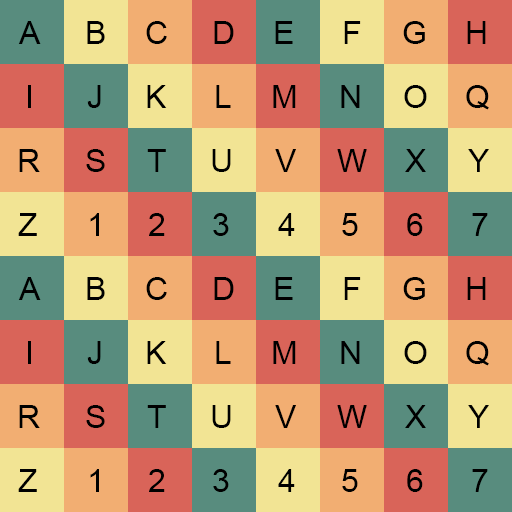
<style>
.page{position:relative;width:512px;height:512px;background:#f2e494}
.page>*{position:absolute;margin:0}
.t1{font:32px "ArialMT";color:#000000}
</style>
<div class="page">
<p class="t1" style="left:18px;top:21px;width:23px;height:23px">A</p>
<p class="t1" style="left:87px;top:21px;width:18px;height:23px">B</p>
<p class="t1" style="left:146px;top:21px;width:21px;height:23px">C</p>
<p class="t1" style="left:214px;top:21px;width:20px;height:23px">D</p>
<p class="t1" style="left:275px;top:21px;width:18px;height:23px">E</p>
<p class="t1" style="left:344px;top:21px;width:17px;height:23px">F</p>
<p class="t1" style="left:403px;top:21px;width:22px;height:23px">G</p>
<p class="t1" style="left:467px;top:21px;width:19px;height:23px">H</p>
<p class="t1" style="left:87px;top:85px;width:14px;height:23px">J</p>
<p class="t1" style="left:147px;top:85px;width:20px;height:23px">K</p>
<p class="t1" style="left:216px;top:85px;width:15px;height:23px">L</p>
<p class="t1" style="left:273px;top:85px;width:23px;height:23px">M</p>
<p class="t1" style="left:341px;top:85px;width:19px;height:23px">N</p>
<p class="t1" style="left:404px;top:85px;width:23px;height:23px">O</p>
<p class="t1" style="left:466px;top:85px;width:23px;height:25px">Q</p>
<p class="t1" style="left:19px;top:149px;width:21px;height:23px">R</p>
<p class="t1" style="left:86px;top:149px;width:19px;height:23px">S</p>
<p class="t1" style="left:147px;top:149px;width:19px;height:23px">T</p>
<p class="t1" style="left:212px;top:149px;width:19px;height:23px">U</p>
<p class="t1" style="left:275px;top:149px;width:21px;height:23px">V</p>
<p class="t1" style="left:337px;top:149px;width:30px;height:23px">W</p>
<p class="t1" style="left:405px;top:149px;width:21px;height:23px">X</p>
<p class="t1" style="left:468px;top:149px;width:21px;height:23px">Y</p>
<p class="t1" style="left:18px;top:213px;width:19px;height:23px">Z</p>
<p class="t1" style="left:90px;top:213px;width:9px;height:23px">1</p>
<p class="t1" style="left:149px;top:213px;width:16px;height:23px">2</p>
<p class="t1" style="left:213px;top:213px;width:16px;height:23px">3</p>
<p class="t1" style="left:278px;top:213px;width:17px;height:23px">4</p>
<p class="t1" style="left:342px;top:213px;width:16px;height:23px">5</p>
<p class="t1" style="left:407px;top:213px;width:16px;height:23px">6</p>
<p class="t1" style="left:472px;top:213px;width:16px;height:23px">7</p>
<p class="t1" style="left:18px;top:277px;width:23px;height:23px">A</p>
<p class="t1" style="left:87px;top:277px;width:18px;height:23px">B</p>
<p class="t1" style="left:146px;top:277px;width:21px;height:23px">C</p>
<p class="t1" style="left:214px;top:277px;width:20px;height:23px">D</p>
<p class="t1" style="left:275px;top:277px;width:18px;height:23px">E</p>
<p class="t1" style="left:344px;top:277px;width:17px;height:23px">F</p>
<p class="t1" style="left:403px;top:277px;width:22px;height:23px">G</p>
<p class="t1" style="left:467px;top:277px;width:19px;height:23px">H</p>
<p class="t1" style="left:87px;top:341px;width:14px;height:23px">J</p>
<p class="t1" style="left:147px;top:341px;width:20px;height:23px">K</p>
<p class="t1" style="left:216px;top:341px;width:15px;height:23px">L</p>
<p class="t1" style="left:273px;top:341px;width:23px;height:23px">M</p>
<p class="t1" style="left:341px;top:341px;width:19px;height:23px">N</p>
<p class="t1" style="left:404px;top:341px;width:23px;height:23px">O</p>
<p class="t1" style="left:466px;top:341px;width:23px;height:25px">Q</p>
<p class="t1" style="left:19px;top:405px;width:21px;height:23px">R</p>
<p class="t1" style="left:86px;top:405px;width:19px;height:23px">S</p>
<p class="t1" style="left:147px;top:405px;width:19px;height:23px">T</p>
<p class="t1" style="left:212px;top:405px;width:19px;height:23px">U</p>
<p class="t1" style="left:275px;top:405px;width:21px;height:23px">V</p>
<p class="t1" style="left:337px;top:405px;width:30px;height:23px">W</p>
<p class="t1" style="left:405px;top:405px;width:21px;height:23px">X</p>
<p class="t1" style="left:468px;top:405px;width:21px;height:23px">Y</p>
<p class="t1" style="left:18px;top:469px;width:19px;height:23px">Z</p>
<p class="t1" style="left:90px;top:469px;width:9px;height:23px">1</p>
<p class="t1" style="left:149px;top:469px;width:16px;height:23px">2</p>
<p class="t1" style="left:213px;top:469px;width:16px;height:23px">3</p>
<p class="t1" style="left:278px;top:469px;width:17px;height:23px">4</p>
<p class="t1" style="left:342px;top:469px;width:16px;height:23px">5</p>
<p class="t1" style="left:407px;top:469px;width:16px;height:23px">6</p>
<p class="t1" style="left:472px;top:469px;width:16px;height:23px">7</p>
</div>
